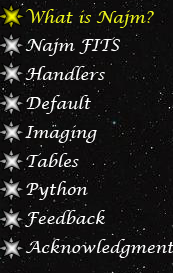
<style>
.page{position:relative;width:173px;height:273px}
.page>*{position:absolute;margin:0}
.t1{font:16px "LucidaCalligraphy-Italic";color:#ffffff}
.t2{font:16px "LucidaCalligraphy-Italic";color:#eef61c}
</style>
<div class="page">
<p class="t1" style="left:25px;top:9px;width:150px;height:249px"><span class="t2">What is Najm?<br><br></span>Najm FITS<br><br>Handlers<br><br>Default<br><br>Imaging<br><br>Tables<br><br>Python<br><br>Feedback<br><br>Acknowledgment</p>
</div>
